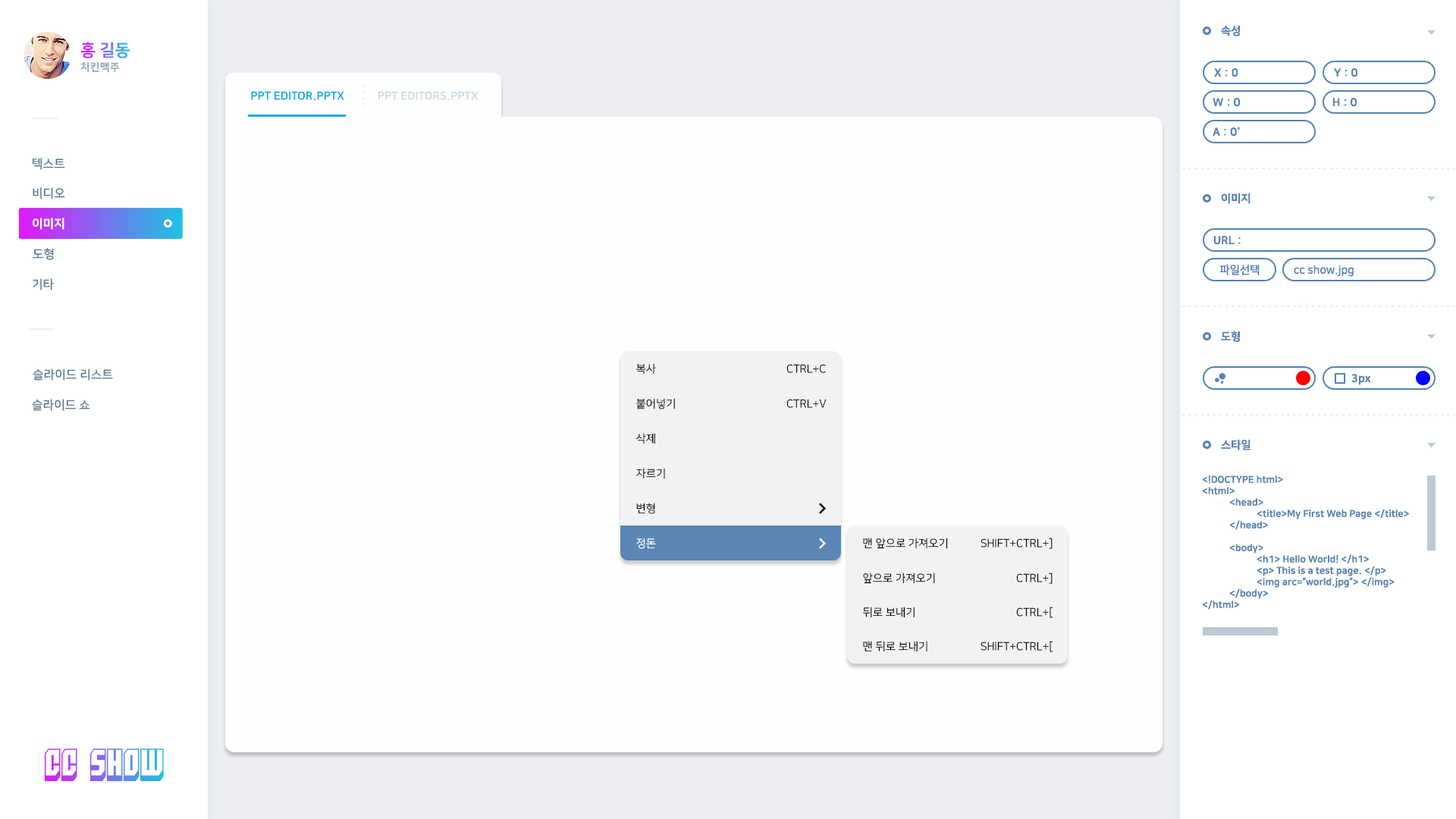
<style>
.page{position:relative;width:1456px;height:819px;background:#fefeff}
.page>*{position:absolute;margin:0}
.t1{font:11.1px "NanumSquareEB";color:#5682b2}
.t2{font:16.7px "NanumSquareEB";text-transform:uppercase}
.t3{font:10.6px "NanumSquareEB";letter-spacing:0.025em;color:#94a8ba;text-transform:uppercase}
.t4{font:11.1px "NanumSquareEB";color:#12aaeb;text-transform:uppercase}
.t5{font:11.1px "NanumSquareEB";color:#cfd9e0;text-transform:uppercase}
.t6{font:12.1px "NanumSquareB";color:#597a96;text-transform:uppercase}
.t7{font:12.1px "NanumSquareEB";color:#ffffff;text-transform:uppercase}
.t8{font:11.1px "NanumSquareB";color:#5682b2}
.t9{font:11.1px "NanumSquareR";color:#000000;text-transform:uppercase}
.t10{font:9.5px "NanumSquareEB";color:#5682b2}
.t11{font:11.1px "NanumSquareR";color:#ffffff;text-transform:uppercase}
.t12{font:31.6px "Blockt"}
</style>
<div class="page">
<p class="t1" style="left:1221px;top:25px;width:19px;height:11px">속성</p>
<p class="t2" style="left:80px;top:42px;width:50px;height:16px">홍 길동</p>
<p class="t3" style="left:80px;top:61px;width:40px;height:12px">치킨맥주</p>
<p class="t1" style="left:1214px;top:68px;width:24px;height:9px">X : 0</p>
<p class="t1" style="left:1334px;top:68px;width:23px;height:9px">Y : 0</p>
<p class="t4" style="left:251px;top:91px;width:93px;height:10px">PPT editor.pptx</p>
<p class="t5" style="left:378px;top:91px;width:101px;height:10px">PPT EDITORS.PPTX</p>
<p class="t1" style="left:1213px;top:98px;width:27px;height:9px">W : 0</p>
<p class="t1" style="left:1333px;top:98px;width:24px;height:9px">H : 0</p>
<p class="t1" style="left:1213px;top:127px;width:27px;height:9px">A : 0˚</p>
<p class="t6" style="left:32px;top:158px;width:33px;height:12px">텍스트</p>
<p class="t6" style="left:33px;top:187px;width:32px;height:12px">비디오</p>
<p class="t1" style="left:1221px;top:193px;width:29px;height:11px">이미지</p>
<p class="t7" style="left:33px;top:218px;width:31px;height:12px">이미지</p>
<p class="t1" style="left:1213px;top:236px;width:28px;height:9px">URL :</p>
<p class="t6" style="left:33px;top:248px;width:21px;height:12px">도형</p>
<p class="t8" style="left:1219px;top:265px;width:41px;height:10px">파일선택</p>
<p class="t8" style="left:1294px;top:265px;width:60px;height:12px">cc show.jpg</p>
<p class="t6" style="left:33px;top:278px;width:21px;height:12px">기타</p>
<p class="t1" style="left:1221px;top:331px;width:19px;height:11px">도형</p>
<p class="t9" style="left:635px;top:363px;width:21px;height:12px">복사</p>
<p class="t9" style="left:786px;top:364px;width:40px;height:9px">Ctrl+c</p>
<p class="t6" style="left:33px;top:369px;width:80px;height:12px">슬라이드 리스트</p>
<p class="t1" style="left:1351px;top:374px;width:20px;height:11px">3px</p>
<p class="t6" style="left:32px;top:399px;width:58px;height:12px">슬라이드 쇼</p>
<p class="t9" style="left:635px;top:398px;width:40px;height:11px">붙어넣기</p>
<p class="t9" style="left:786px;top:399px;width:41px;height:9px">Ctrl+v</p>
<p class="t9" style="left:635px;top:433px;width:20px;height:11px">삭제</p>
<p class="t1" style="left:1221px;top:439px;width:29px;height:11px">스타일</p>
<p class="t9" style="left:636px;top:468px;width:29px;height:11px">자르기</p>
<p class="t10" style="left:1202px;top:475px;width:207px;height:135px">&lt;!DOCTYPE html&gt;<br>&lt;html&gt;<br> &lt;head&gt;<br>  &lt;title&gt;My First Web Page &lt;/title&gt;<br> &lt;/head&gt;<br><br> &lt;body&gt;<br>  &lt;h1&gt; Hello World! &lt;/h1&gt;<br>  &lt;p&gt; This is a test page. &lt;/p&gt;<br>  &lt;img arc=”world.jpg”&gt; &lt;/img&gt;<br> &lt;/body&gt;<br>&lt;/html&gt;</p>
<p class="t9" style="left:636px;top:503px;width:19px;height:11px">변형</p>
<p class="t11" style="left:636px;top:538px;width:20px;height:11px">정돈</p>
<p class="t9" style="left:863px;top:538px;width:85px;height:11px">맨 앞으로 가져오기</p>
<p class="t9" style="left:981px;top:538px;width:72px;height:11px">Shift+ctrl+]</p>
<p class="t9" style="left:863px;top:573px;width:72px;height:11px">앞으로 가져오기</p>
<p class="t9" style="left:1016px;top:573px;width:37px;height:11px">ctrl+]</p>
<p class="t9" style="left:863px;top:607px;width:52px;height:11px">뒤로 보내기</p>
<p class="t9" style="left:1016px;top:607px;width:37px;height:11px">ctrl+[</p>
<p class="t9" style="left:863px;top:641px;width:64px;height:11px">맨 뒤로 보내기</p>
<p class="t9" style="left:981px;top:641px;width:72px;height:11px">shift+ctrl+[</p>
<p class="t12" style="left:44px;top:748px;width:120px;height:34px">CC SHOW</p>
</div>
